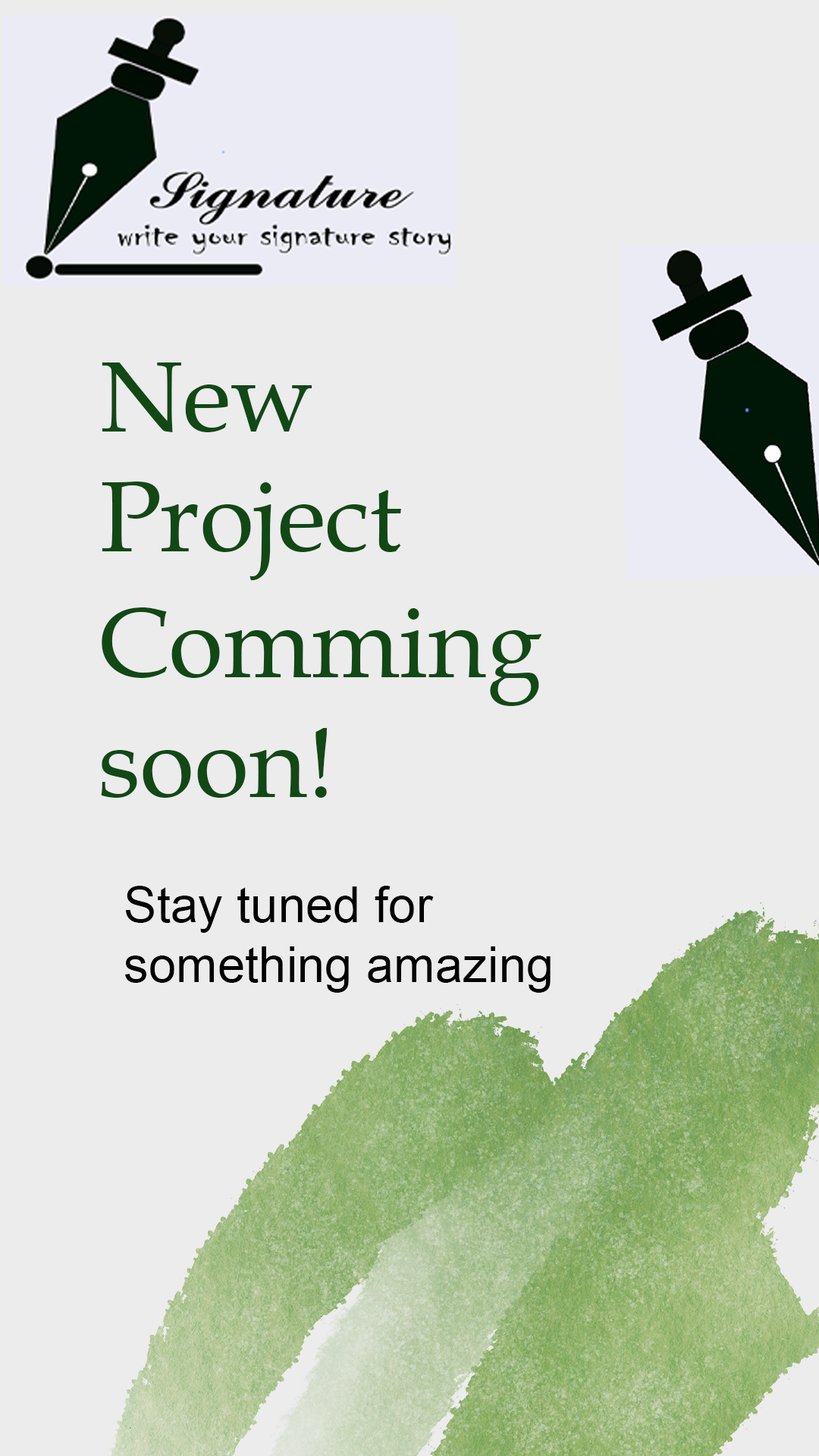
<style>
.page{position:relative;width:819px;height:1456px;background:#ececec}
.page>*{position:absolute;margin:0}
.t1{font:99.8px "BookAntiqua";color:#124815}
.t2{font:49.6px "ArialMT";color:#020202}
</style>
<div class="page">
<p class="t1" style="left:102px;top:362px;width:299px;height:219px">New <br>Project</p>
<p class="t1" style="left:101px;top:607px;width:441px;height:191px">Comming <br>soon!</p>
<p class="t2" style="left:125px;top:886px;width:426px;height:107px">Stay tuned for<br>something amazing</p>
</div>
